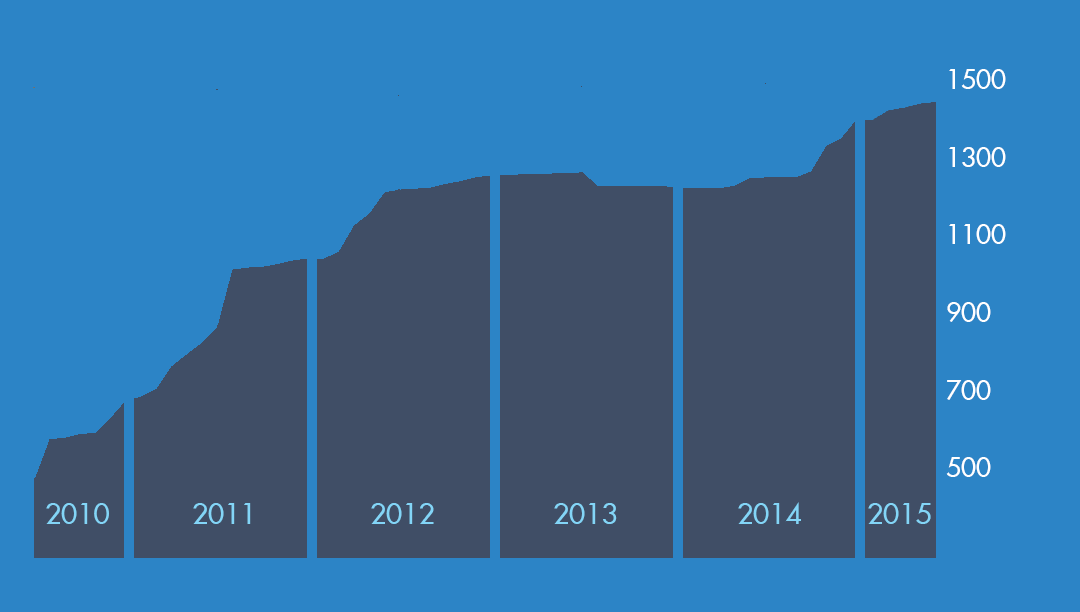
<style>
.page{position:relative;width:1080px;height:612px;background:#2c84c6}
.page>*{position:absolute;margin:0}
.t1{font:26px "FuturaExtended";color:#ffffff}
.t2{font:28px "FuturaExtended";color:#83d5f7}
</style>
<div class="page">
<p class="t1" style="left:949px;top:69px;width:57px;height:20px">1500</p>
<p class="t1" style="left:949px;top:147px;width:57px;height:20px">1300</p>
<p class="t1" style="left:949px;top:224px;width:57px;height:20px">1100</p>
<p class="t1" style="left:947px;top:302px;width:44px;height:20px">900</p>
<p class="t1" style="left:947px;top:380px;width:44px;height:20px">700</p>
<p class="t1" style="left:946px;top:457px;width:45px;height:20px">500</p>
<p class="t2" style="left:46px;top:503px;width:63px;height:21px">2010</p>
<p class="t2" style="left:193px;top:503px;width:58px;height:21px">2011</p>
<p class="t2" style="left:371px;top:503px;width:63px;height:21px">2012</p>
<p class="t2" style="left:554px;top:503px;width:63px;height:21px">2013</p>
<p class="t2" style="left:738px;top:502px;width:63px;height:22px">2014</p>
<p class="t2" style="left:868px;top:503px;width:63px;height:21px">2015</p>
</div>
